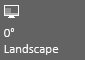
<style>
.page{position:relative;width:85px;height:60px;background:#636363}
.page>*{position:absolute;margin:0}
.t1{font:13px "Calibri-Light";color:#ffffff}
</style>
<div class="page">
<p class="t1" style="left:4px;top:28px;width:10px;height:9px">0°</p>
<p class="t1" style="left:4px;top:44px;width:55px;height:11px">Landscape</p>
</div>
